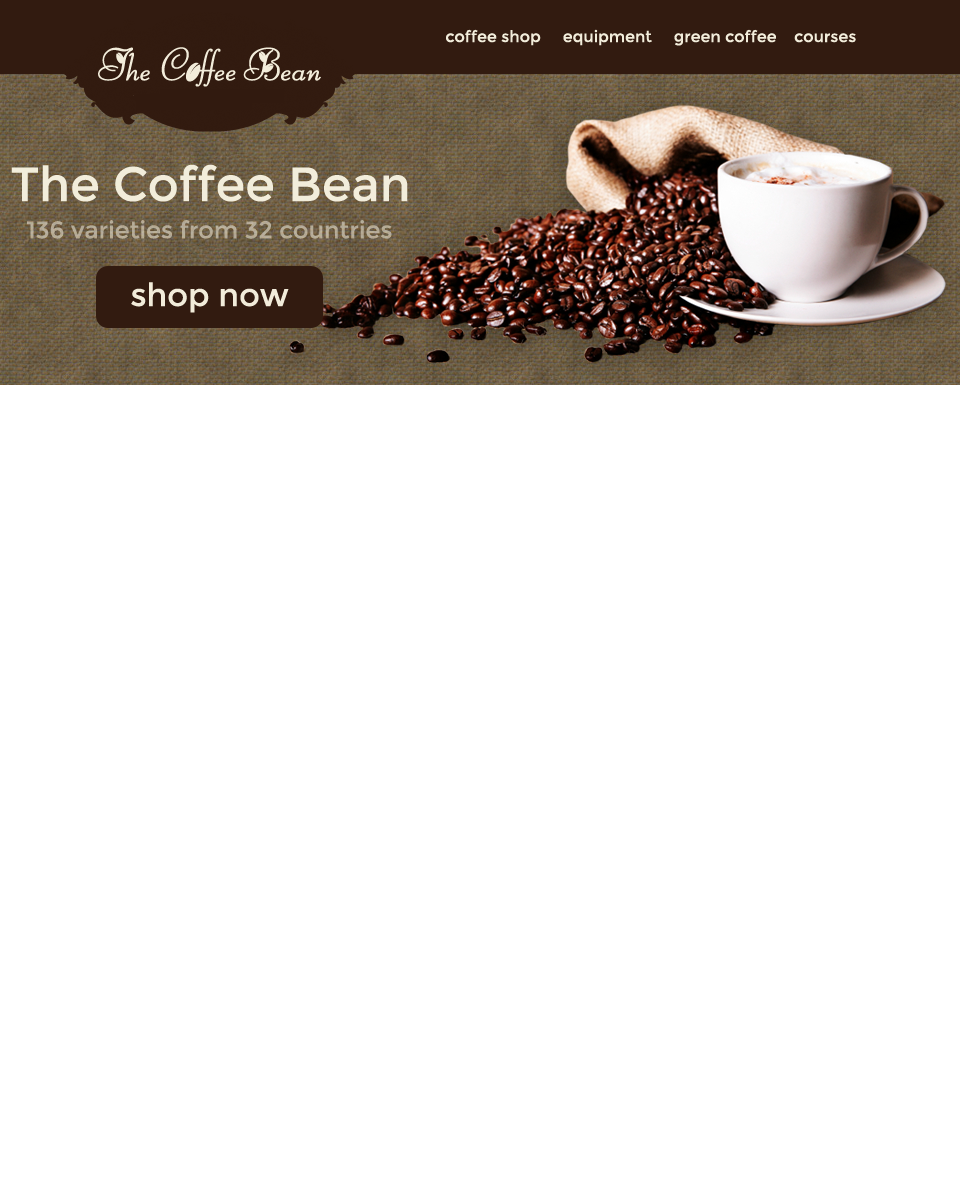
<style>
.page{position:relative;width:960px;height:1200px;background:#ffffff}
.page>*{position:absolute;margin:0}
.t1{font:16px "Montserrat-Regular";color:#f2eddb}
.t2{font:48px "Montserrat-Regular";color:#f2eddb}
.t3{font:24px "Montserrat-Regular";color:#b6ac98}
.t4{font:32px "Montserrat-Regular";color:#f2ecda}
</style>
<div class="page">
<p class="t1" style="left:446px;top:29px;width:410px;height:17px">coffee shop     equipment     green coffee    courses</p>
<p class="t2" style="left:11px;top:164px;width:397px;height:38px">The Coffee Bean</p>
<p class="t3" style="left:27px;top:220px;width:365px;height:19px">136 varieties from 32 countries</p>
<p class="t4" style="left:131px;top:282px;width:158px;height:31px">shop now</p>
</div>
